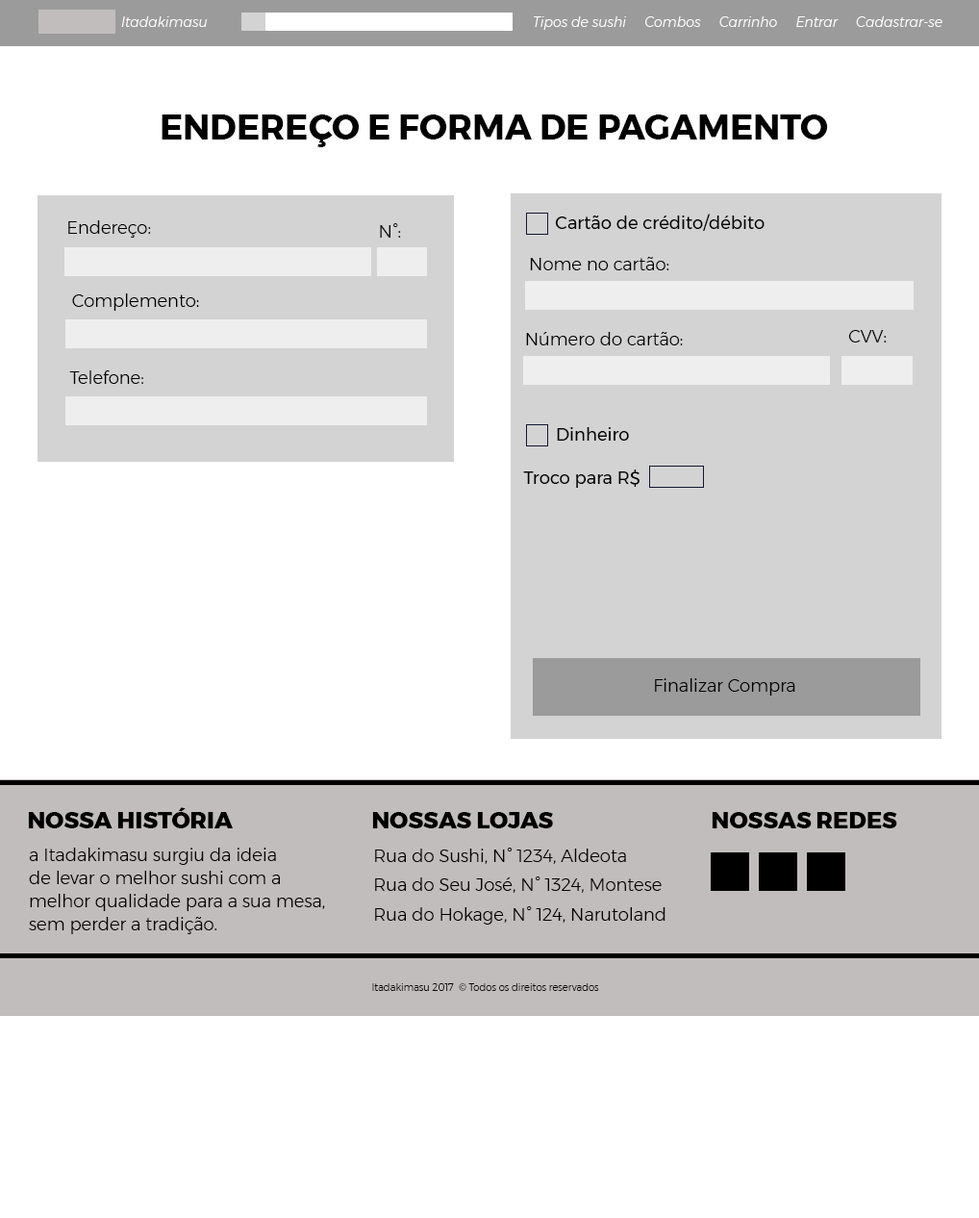
<style>
.page{position:relative;width:979px;height:1218px;background:#ffffff}
.page>*{position:absolute;margin:0}
.t1{font:13.5px "Montserrat-LightItalic";color:#fefcfc}
.t2{font:34.6px "Montserrat-Bold";color:#000000;text-transform:uppercase}
.t3{font:17.3px "Montserrat-Light";color:#000000}
.t4{font:17.3px "Montserrat-Regular";color:#000000}
.t5{font:23.1px "Montserrat-ExtraBold";color:#000000;text-transform:uppercase}
.t6{font:17.3px/23.1px "Montserrat-Light";color:#000000}
.t7{font:9.6px "Montserrat-Light";color:#000000}
</style>
<div class="page">
<p class="t1" style="left:121px;top:16px;width:87px;height:11px">Itadakimasu</p>
<p class="t1" style="left:534px;top:16px;width:409px;height:14px">Tipos de sushi     Combos     Carrinho     Entrar     Cadastrar-se</p>
<p class="t2" style="left:162px;top:114px;width:666px;height:33px">Endereço e forma de pagamento</p>
<p class="t3" style="left:68px;top:220px;width:83px;height:18px">Endereço:</p>
<p class="t4" style="left:555px;top:214px;width:210px;height:17px">Cartão de crédito/débito</p>
<p class="t3" style="left:380px;top:223px;width:21px;height:15px">N°:</p>
<p class="t3" style="left:530px;top:257px;width:139px;height:13px">Nome no cartão:</p>
<p class="t3" style="left:72px;top:293px;width:127px;height:18px">Complemento:</p>
<p class="t3" style="left:848px;top:330px;width:39px;height:12px">CVV:</p>
<p class="t3" style="left:526px;top:332px;width:157px;height:13px">Número do cartão:</p>
<p class="t3" style="left:69px;top:370px;width:74px;height:14px">Telefone:</p>
<p class="t4" style="left:557px;top:427px;width:72px;height:14px">Dinheiro</p>
<p class="t4" style="left:523px;top:469px;width:117px;height:19px">Troco para R$</p>
<p class="t3" style="left:655px;top:678px;width:140px;height:17px">Finalizar Compra</p>
<p class="t5" style="left:28px;top:807px;width:206px;height:21px">Nossa história</p>
<p class="t5" style="left:372px;top:812px;width:181px;height:16px">Nossas lojas</p>
<p class="t5" style="left:712px;top:812px;width:185px;height:16px">Nossas Redes</p>
<p class="t6" style="left:29px;top:847px;width:296px;height:87px">a Itadakimasu surgiu da ideia<br>de levar o melhor sushi com a <br>melhor qualidade para a sua mesa,<br>sem perder a tradição.</p>
<p class="t3" style="left:375px;top:847px;width:251px;height:17px">Rua do Sushi, N° 1234, Aldeota</p>
<p class="t3" style="left:375px;top:876px;width:287px;height:17px">Rua do Seu José, N° 1324, Montese</p>
<p class="t3" style="left:375px;top:906px;width:291px;height:18px">Rua do Hokage, N° 124, Narutoland</p>
<p class="t7" style="left:372px;top:983px;width:227px;height:8px">Itadakimasu 2017  © Todos os direitos reservados</p>
</div>
